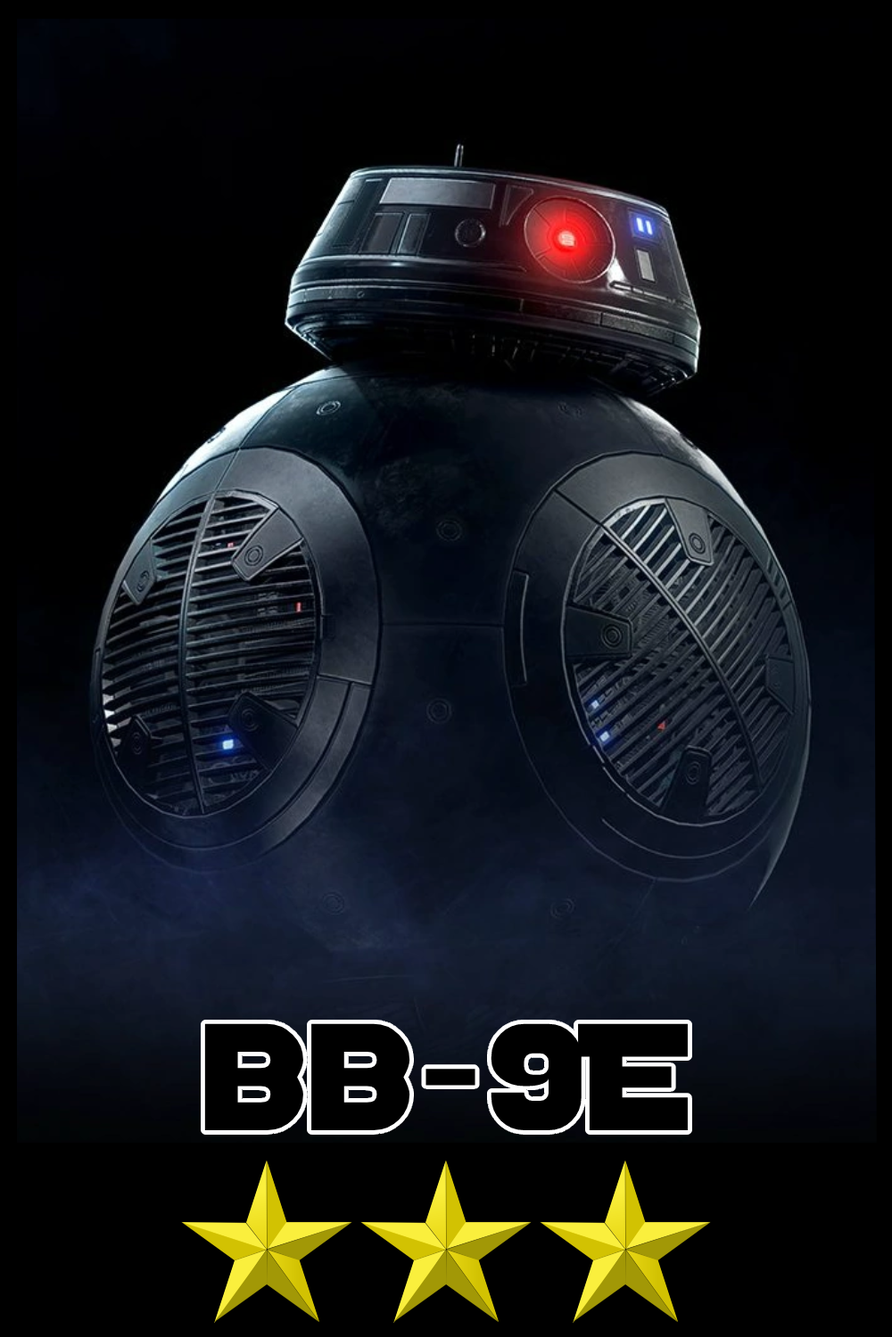
<style>
.page{position:relative;width:892px;height:1337px;background:#000000}
.page>*{position:absolute;margin:0}
.t1{font:163.5px "DistantGalaxy";color:#000000}
</style>
<div class="page">
<p class="t1" style="left:204px;top:1024px;width:483px;height:107px">bb-9E</p>
</div>
